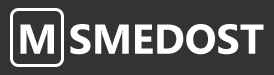
<style>
.page{position:relative;width:274px;height:75px;background:#333333}
.page>*{position:absolute;margin:0}
.t1{font:41.7px "Ebrima-Bold";color:#ffffff}
</style>
<div class="page">
<p class="t1" style="left:20px;top:24px;width:34px;height:30px">M</p>
<p class="t1" style="left:70px;top:24px;width:194px;height:31px">SMEDOST</p>
</div>
